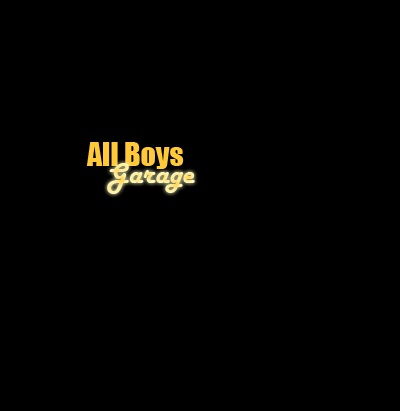
<style>
.page{position:relative;width:400px;height:411px;background:#000000}
.page>*{position:absolute;margin:0}
.t1{font:30px "Impact";color:#ffc938}
.t2{font:30px "HarlowSolid"}
</style>
<div class="page">
<p class="t1" style="left:86px;top:142px;width:98px;height:27px">All Boys</p>
<p class="t2" style="left:107px;top:163px;width:88px;height:31px">Garage</p>
</div>
